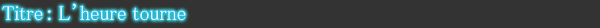
<style>
.page{position:relative;width:600px;height:28px;background:#333333}
.page>*{position:absolute;margin:0}
.t1{font:20px "MS-PMincho";color:#ffffff}
</style>
<div class="page">
<p class="t1" style="left:2px;top:3px;width:184px;height:18px">Titre : L’heure tourne</p>
</div>
